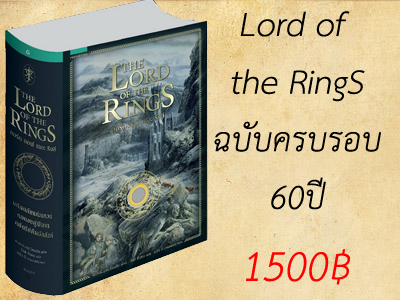
<style>
.page{position:relative;width:400px;height:300px}
.page>*{position:absolute;margin:0}
.t1{font:48px "THSarabunPSK";color:#000000;font-style:italic}
.t2{font:60px "THSarabunPSK";color:#ff0000;font-style:italic}
</style>
<div class="page">
<p class="t1" style="left:214px;top:11px;width:167px;height:274px;text-align:center">Lord of <br>the RingS<br>ฉบับครบรอบ<br>60ปี<br><span class="t2">1500฿</span></p>
</div>
